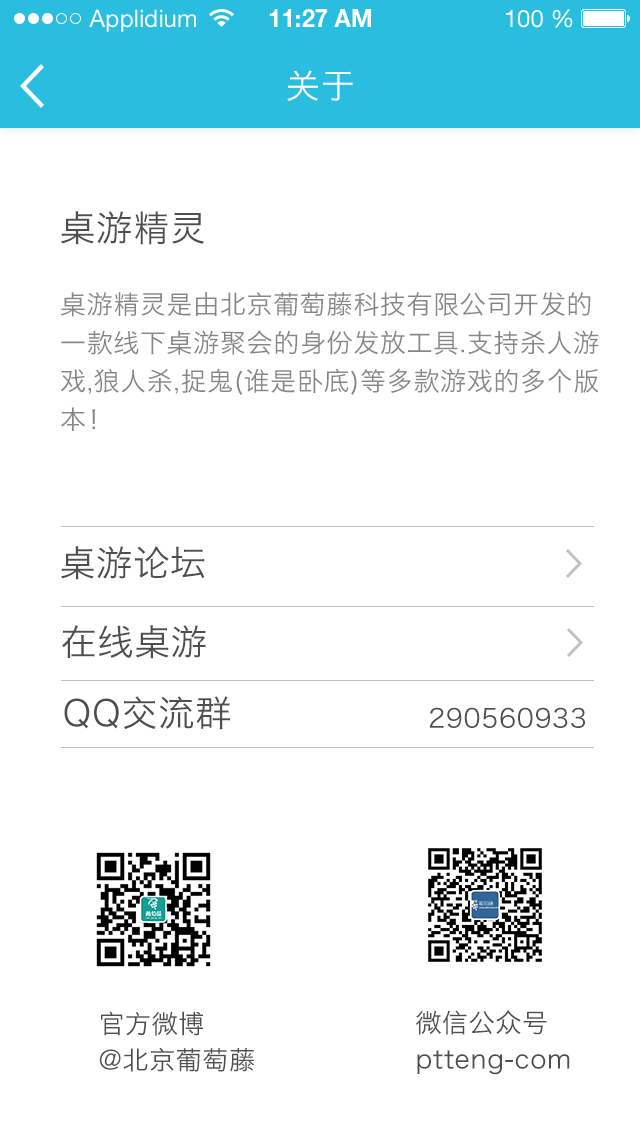
<style>
.page{position:relative;width:640px;height:1136px;background:#ffffff}
.page>*{position:absolute;margin:0}
.t1{font:34px "HiraginoSansGB-W3";letter-spacing:0.025em;color:#ffffff}
.t2{font:36px "HiraginoSansGB-W3";letter-spacing:0.025em;color:#4e4e4e}
.t3{font:26px/38.4px "HiraginoSansGB-W3";letter-spacing:0.025em;color:#868686}
.t4{font:26px "HiraginoSansGB-W3";letter-spacing:0.025em;color:#4e4e4e}
.t5{font:26px/36.4px "HiraginoSansGB-W3";letter-spacing:0.025em;color:#4e4e4e}
</style>
<div class="page">
<p class="t1" style="left:287px;top:70px;width:66px;height:31px">关于</p>
<p class="t2" style="left:61px;top:211px;width:143px;height:34px">桌游精灵</p>
<p class="t3" style="left:60px;top:292px;width:539px;height:139px">桌游精灵是由北京葡萄藤科技有限公司开发的一款线下桌游聚会的身份发放工具.支持杀人游戏,狼人杀,捉鬼(谁是卧底)等多款游戏的多个版本！</p>
<p class="t2" style="left:61px;top:546px;width:144px;height:34px">桌游论坛</p>
<p class="t2" style="left:62px;top:625px;width:144px;height:34px">在线桌游</p>
<p class="t2" style="left:64px;top:696px;width:166px;height:34px">QQ交流群</p>
<p class="t4" style="left:429px;top:707px;width:156px;height:21px">290560933</p>
<p class="t5" style="left:99px;top:1011px;width:156px;height:61px">官方微博<br>@北京葡萄藤</p>
<p class="t5" style="left:416px;top:1010px;width:154px;height:65px">微信公众号<br>ptteng-com</p>
</div>
